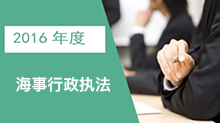
<style>
.page{position:relative;width:220px;height:123px;background:#55ae8e}
.page>*{position:absolute;margin:0}
.t1{font:15.8px "PingFang-SC-Heavy";color:#ffffff}
</style>
<div class="page">
<p class="t1" style="left:16px;top:76px;width:95px;height:16px">海事行政执法</p>
</div>
